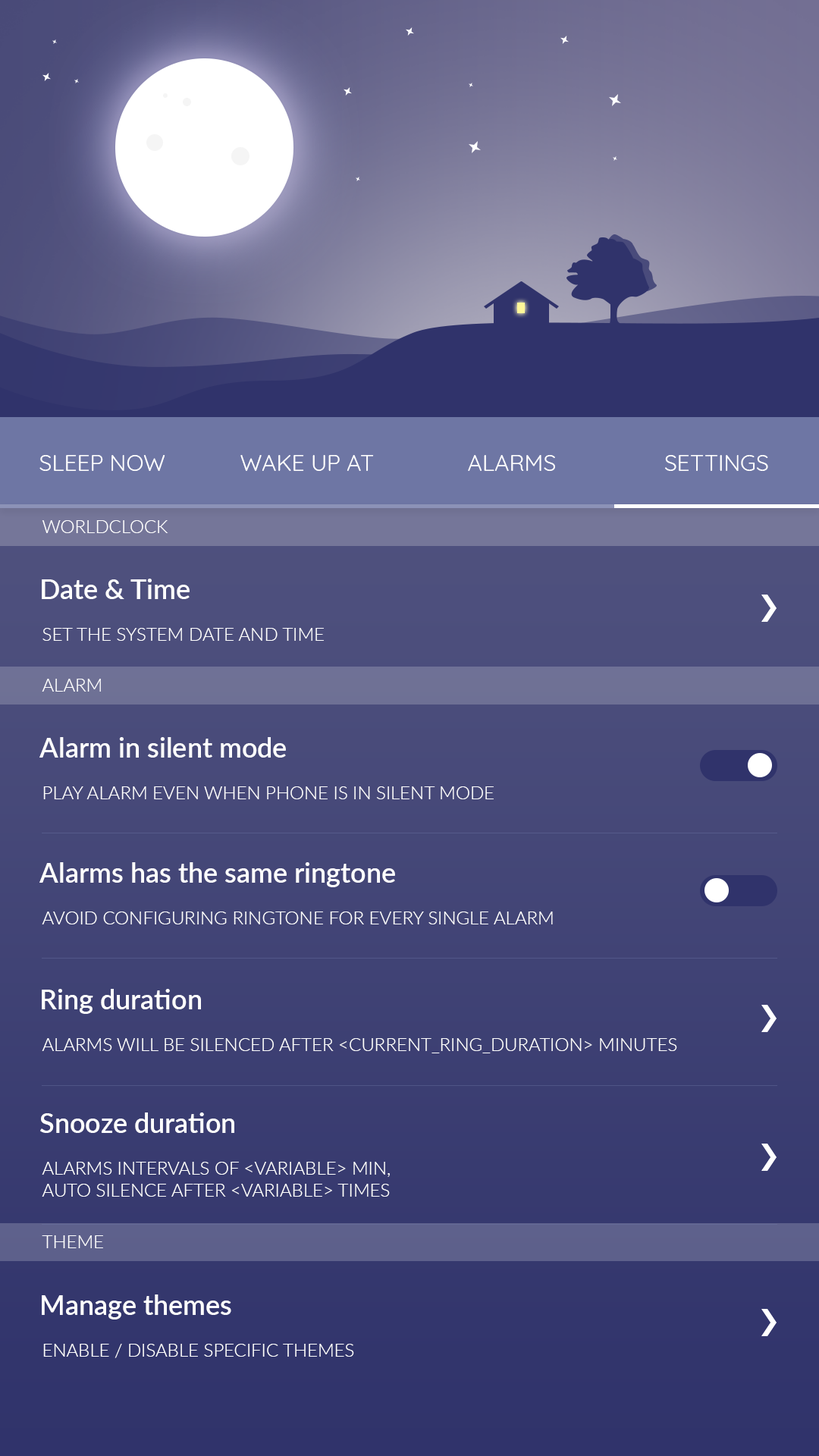
<style>
.page{position:relative;width:819px;height:1456px}
.page>*{position:absolute;margin:0}
.t1{font:22.7px "Quicksand-Regular";color:#ffffff}
.t2{font:18.2px "Lato-Light";color:#ffffff;text-transform:uppercase}
.t3{font:27.3px "Lato-Semibold";color:#ffffff}
</style>
<div class="page">
<p class="t1" style="left:39px;top:455px;width:126px;height:16px">SLEEP NOW</p>
<p class="t1" style="left:240px;top:455px;width:134px;height:16px">WAKE UP AT</p>
<p class="t1" style="left:468px;top:455px;width:87px;height:16px">ALARMS</p>
<p class="t1" style="left:665px;top:455px;width:103px;height:16px">SETTINGS</p>
<p class="t2" style="left:42px;top:520px;width:126px;height:13px">WORLDCLOCK</p>
<p class="t3" style="left:42px;top:579px;width:148px;height:20px">Date &amp; Time</p>
<p class="t2" style="left:42px;top:628px;width:282px;height:13px">SET THE SYSTEM DATE AND TIME</p>
<p class="t2" style="left:42px;top:679px;width:59px;height:13px">Alarm</p>
<p class="t3" style="left:39px;top:737px;width:247px;height:21px">Alarm in silent mode</p>
<p class="t2" style="left:43px;top:786px;width:451px;height:13px">PLAY ALARM EVEN WHEN PHONE IS IN SILENT MODE</p>
<p class="t3" style="left:39px;top:862px;width:356px;height:25px">Alarms has the same ringtone</p>
<p class="t2" style="left:42px;top:912px;width:511px;height:12px">avoid configuring ringtone for every single alarm</p>
<p class="t3" style="left:42px;top:989px;width:159px;height:25px">Ring duration</p>
<p class="t2" style="left:42px;top:1038px;width:635px;height:15px">Alarms will be silenced after &lt;current_ring_duration&gt; minutes</p>
<p class="t3" style="left:40px;top:1112px;width:194px;height:21px">Snooze duration</p>
<p class="t2" style="left:42px;top:1162px;width:348px;height:35px">Alarms intervals of &lt;variable&gt; min, <br>auto silence after &lt;variable&gt; times</p>
<p class="t2" style="left:42px;top:1235px;width:61px;height:13px">THEME</p>
<p class="t3" style="left:42px;top:1294px;width:189px;height:25px">Manage themes</p>
<p class="t2" style="left:43px;top:1344px;width:311px;height:14px">ENABLE / DISABLE SPECIFIC THEMES</p>
</div>
